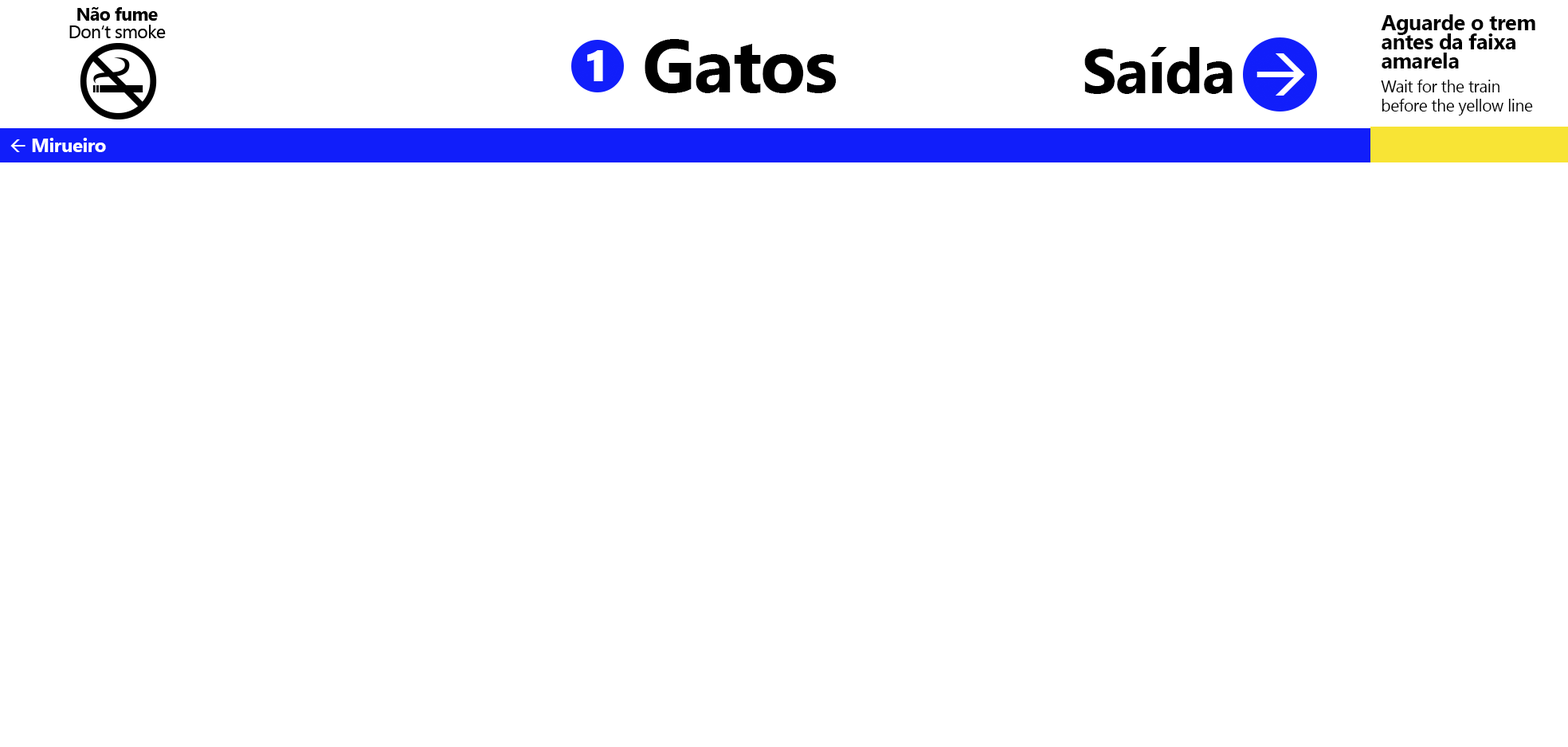
<style>
.page{position:relative;width:1568px;height:747px;background:#ffffff}
.page>*{position:absolute;margin:0}
.t1{font:37.2px/19.2px "SegoeUI-Bold";letter-spacing:-0.02em;color:#000000}
.t2{font:128.3px "SegoeUI-Bold";letter-spacing:-0.02em;color:#000000}
.t3{font:107.1px "SegoeUI-Bold";letter-spacing:-0.02em;color:#000000}
.t4{font:28.7px/19.2px "SegoeUI";letter-spacing:-0.02em;color:#000000}
.t5{font:32.7px "SegoeUI-Bold";letter-spacing:-0.02em;color:#ffffff}
</style>
<div class="page">
<p class="t1" style="left:1381px;top:14px;width:154px;height:55px">Aguarde o trem<br>antes da faixa <br>amarela</p>
<p class="t2" style="left:645px;top:39px;width:192px;height:54px">Gatos</p>
<p class="t3" style="left:1084px;top:47px;width:149px;height:47px">Saída</p>
<p class="t4" style="left:1381px;top:80px;width:152px;height:36px">Wait for the train<br>before the yellow line</p>
<p class="t5" style="left:32px;top:138px;width:74px;height:14px">Mirueiro</p>
</div>
